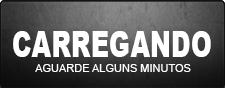
<style>
.page{position:relative;width:225px;height:88px}
.page>*{position:absolute;margin:0}
.t1{font:36.1px "Arial-Black";color:#ffffff;scale:0.7 1}
.t2{font:11px "ArialMT";color:#ffffff}
</style>
<div class="page">
<p class="t1" style="left:13px;top:31px;width:198px;height:26px">CARREGANDO</p>
<p class="t2" style="left:35px;top:64px;width:156px;height:8px">AGUARDE ALGUNS MINUTOS</p>
</div>
